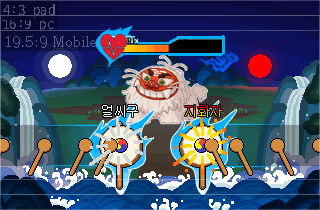
<style>
.page{position:relative;width:320px;height:210px}
.page>*{position:absolute;margin:0}
.t1{font:15px "D2Codingligature";color:#55557a}
.t2{font:15px "D2Codingligature";color:#55557f}
.t3{font:14px "AdobeMyungjoStd-Medium";color:#56598c}
.t4{font:12.9px "Gulim";color:#ffffff}
.t5{font:12.9px "Gulim"}
</style>
<div class="page">
<p class="t1" style="left:3px;top:4px;width:52px;height:13px">4:3 pad</p>
<p class="t2" style="left:3px;top:19px;width:51px;height:12px">16:9 pc</p>
<p class="t3" style="left:6px;top:35px;width:90px;height:13px">19.5:9 Mobile</p>
<p class="t4" style="left:102px;top:105px;width:36px;height:12px">얼씨구</p>
<p class="t5" style="left:185px;top:105px;width:37px;height:12px">지화자</p>
</div>
